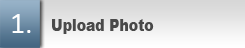
<style>
.page{position:relative;width:245px;height:48px}
.page>*{position:absolute;margin:0}
.t1{font:30px "Calibri";color:#ffffff}
.t2{font:16.8px "Arial-Black";color:#494949;scale:0.83 1}
</style>
<div class="page">
<p class="t1" style="left:12px;top:14px;width:19px;height:19px">1.</p>
<p class="t2" style="left:52px;top:19px;width:102px;height:15px">Upload Photo</p>
</div>
